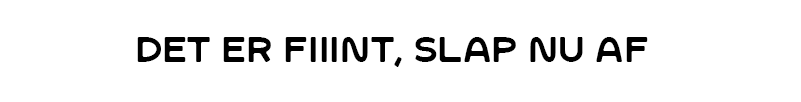
<style>
.page{position:relative;width:801px;height:102px;background:#ffffff}
.page>*{position:absolute;margin:0}
.t1{font:35.4px "SFCWosterSans-Regular";color:#000000}
</style>
<div class="page">
<p class="t1" style="left:137px;top:37px;width:511px;height:30px">Det er Fiiint, slap nu af</p>
</div>
